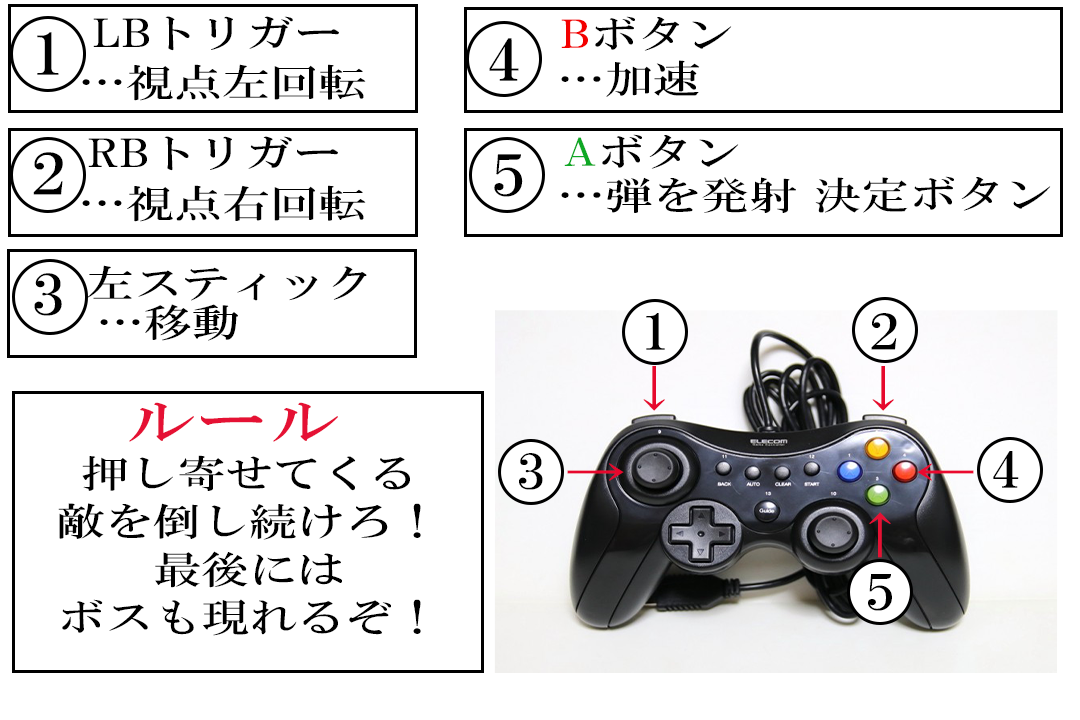
<style>
.page{position:relative;width:1080px;height:720px;background:#ffffff}
.page>*{position:absolute;margin:0}
.t1{font:38.4px "HGSMinchoB";color:#000000;scale:1.25 1}
.t2{font:38.4px "HGSMinchoB";color:#f30000;scale:1.25 1}
.t3{font:57.6px "HGSMinchoB";color:#000000;scale:1.25 1}
.t4{font:57.5px "HGSMinchoB";color:#000000;scale:1.25 1}
.t5{font:38.4px "HGSMinchoB";color:#0ea824;scale:1.25 1}
.t6{font:49.8px "HGSMinchoB";color:#000000;scale:1.25 1}
.t7{font:49.8px "HGSMinchoB";color:#e6082d;scale:1.25 1}
.t8{font:57.6px "HGSMinchoB";color:#e51134;scale:1.25 1}
.t9{font:38.4px/48px "HGSMinchoB";color:#000000;scale:1.25 1}
.t10{font:49.8px "HGSMinchoB";color:#e7072d;scale:1.25 1}
.t11{font:49.8px "HGSMinchoB";color:#ea092f;scale:1.25 1}
.t12{font:49.8px "HGSMinchoB";color:#e51134;scale:1.25 1}
</style>
<div class="page">
<p class="t1" style="left:93px;top:16px;width:246px;height:35px">LBトリガー</p>
<p class="t1" style="left:561px;top:16px;width:171px;height:35px"><span class="t2">B</span>ボタン</p>
<p class="t3" style="left:37px;top:32px;width:22px;height:43px">1</p>
<p class="t4" style="left:489px;top:38px;width:30px;height:43px">4</p>
<p class="t1" style="left:82px;top:64px;width:284px;height:37px">…視点左回転</p>
<p class="t1" style="left:561px;top:60px;width:139px;height:37px">…加速</p>
<p class="t1" style="left:88px;top:136px;width:250px;height:35px">RBトリガー</p>
<p class="t1" style="left:564px;top:134px;width:175px;height:35px"><span class="t5">A</span>ボタン</p>
<p class="t3" style="left:33px;top:152px;width:30px;height:43px">2</p>
<p class="t4" style="left:494px;top:154px;width:29px;height:43px">5</p>
<p class="t1" style="left:82px;top:185px;width:284px;height:37px">…視点右回転</p>
<p class="t1" style="left:561px;top:176px;width:490px;height:37px">…弾を発射 決定ボタン</p>
<p class="t1" style="left:87px;top:265px;width:280px;height:36px">左スティック</p>
<p class="t3" style="left:34px;top:273px;width:28px;height:43px">3</p>
<p class="t1" style="left:100px;top:304px;width:138px;height:37px">…移動</p>
<p class="t6" style="left:646px;top:313px;width:19px;height:37px">1</p>
<p class="t6" style="left:871px;top:313px;width:26px;height:37px">2</p>
<p class="t7" style="left:643px;top:366px;width:22px;height:45px">↓</p>
<p class="t7" style="left:872px;top:366px;width:22px;height:45px">↓</p>
<p class="t8" style="left:129px;top:402px;width:209px;height:40px">ルール</p>
<p class="t9" style="left:58px;top:455px;width:363px;height:181px;text-align:center">押し寄せてくる<br>敵を倒し続けろ！<br>最後には<br>ボスも現れるぞ！</p>
<p class="t6" style="left:519px;top:453px;width:24px;height:37px">3</p>
<p class="t6" style="left:993px;top:451px;width:26px;height:37px">4</p>
<p class="t10" style="left:567px;top:463px;width:57px;height:18px">→</p>
<p class="t11" style="left:917px;top:463px;width:57px;height:18px">←</p>
<p class="t12" style="left:869px;top:512px;width:22px;height:46px">↑</p>
<p class="t6" style="left:868px;top:574px;width:24px;height:37px">5</p>
</div>
